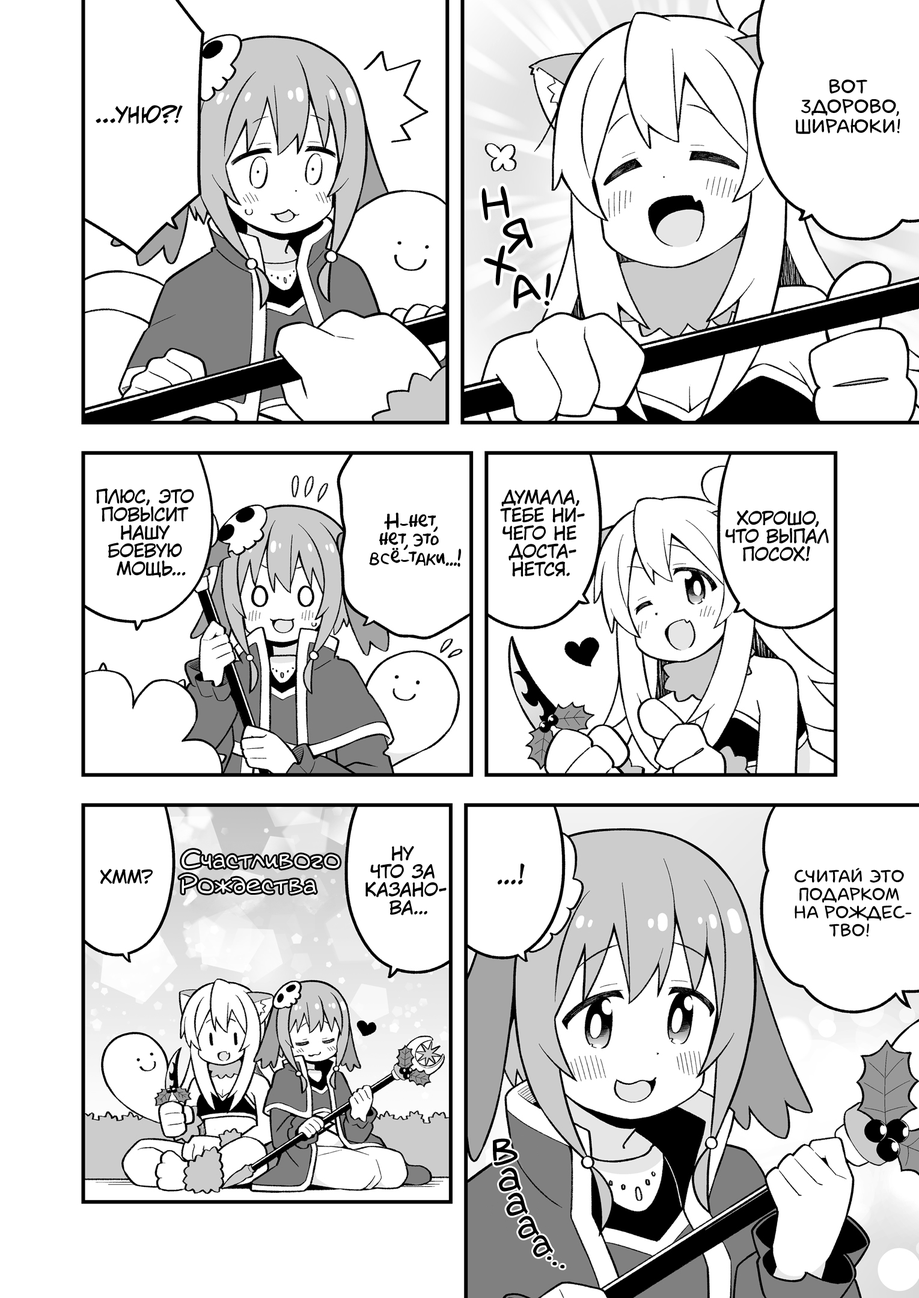
<style>
.page{position:relative;width:919px;height:1298px;background:#ffffff}
.page>*{position:absolute;margin:0}
.t1{font:19.8px "laCartoonerie";color:#000000;text-transform:uppercase}
.t2{font:21.6px "v_CCJeffCampbell";color:#000000;text-transform:uppercase}
.t3{font:45.1px "laCartoonerie";color:#000000;text-transform:uppercase}
.t4{font:18px "KuraiVoice2";color:#000000;text-transform:uppercase}
.t5{font:18px "AkbarPlain";color:#000000}
.t6{font:25.2px "v_Augie";color:#ffffff}
.t7{font:25.2px "KuraiVoice2";color:#000000;text-transform:uppercase}
.t8{font:18px "laCartoonerie";color:#000000;text-transform:uppercase}
.t9{font:46.9px "v_Augie";color:#000000}
.t10{font:45.1px "v_Augie";color:#000000}
.t11{font:43.3px "v_Augie";color:#000000}
.t12{font:41.5px "v_Augie";color:#000000}
.t13{font:39.7px "v_Augie";color:#000000}
.t14{font:36.1px "v_Augie";color:#000000}
</style>
<div class="page">
<p class="t1" style="left:796px;top:79px;width:104px;height:55px;text-align:center">Вот<br>здорово,<br>Шираюки!</p>
<p class="t2" style="left:96px;top:105px;width:87px;height:19px">...Уню?!</p>
<p class="t3" style="left:481px;top:186px;width:29px;height:35px;rotate:-6deg">н</p>
<p class="t3" style="left:502px;top:218px;width:31px;height:36px;rotate:-15deg">я</p>
<p class="t3" style="left:484px;top:245px;width:33px;height:41px;rotate:-32deg">х</p>
<p class="t3" style="left:513px;top:275px;width:28px;height:34px;rotate:-18deg">а</p>
<p class="t3" style="left:544px;top:273px;width:7px;height:33px">!</p>
<p class="t4" style="left:96px;top:488px;width:98px;height:89px;text-align:center">Плюс, это<br>повысит<br>нашу<br>боевую<br>мощь...</p>
<p class="t4" style="left:500px;top:489px;width:85px;height:88px;text-align:center">Думала,<br>тебе ни-<br>чего не<br>доста-<br>нется.</p>
<p class="t5" style="left:369px;top:513px;width:92px;height:54px;text-align:center">Н-нет,<br>нет, это<br>всё-таки...!</p>
<p class="t4" style="left:725px;top:510px;width:104px;height:51px;text-align:center">Хорошо,<br>что выпал<br>посох!</p>
<p class="t4" style="left:365px;top:845px;width:81px;height:70px;text-align:center">Ну<br>что за<br>казано-<br>ва...</p>
<p class="t6" style="left:179px;top:850px;width:161px;height:44px">Счастливого<br>Рождества</p>
<p class="t4" style="left:100px;top:869px;width:53px;height:15px">Хмм?</p>
<p class="t7" style="left:498px;top:863px;width:27px;height:21px">...!</p>
<p class="t8" style="left:794px;top:868px;width:118px;height:69px;text-align:center">Считай это<br>подарком<br>на Рождес-<br>тво!</p>
<p class="t9" style="left:492px;top:1138px;width:25px;height:28px;rotate:-2deg">в</p>
<p class="t10" style="left:499px;top:1168px;width:22px;height:24px;rotate:-2deg">а</p>
<p class="t11" style="left:506px;top:1192px;width:22px;height:24px;rotate:-7deg">а</p>
<p class="t12" style="left:518px;top:1216px;width:21px;height:22px;rotate:-12deg">а</p>
<p class="t13" style="left:532px;top:1235px;width:21px;height:22px;rotate:-16deg">а</p>
<p class="t14" style="left:547px;top:1256px;width:5px;height:4px">.</p>
<p class="t14" style="left:552px;top:1261px;width:5px;height:4px">.</p>
<p class="t14" style="left:560px;top:1264px;width:5px;height:4px">.</p>
</div>
